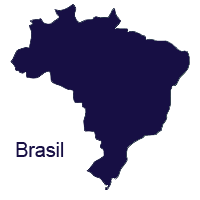
<style>
.page{position:relative;width:200px;height:200px;background:#ffffff}
.page>*{position:absolute;margin:0}
.t1{font:20.8px "ArialMT";color:#170f44;scale:0.94 1}
</style>
<div class="page">
<p class="t1" style="left:16px;top:142px;width:48px;height:15px">Brasil</p>
</div>
